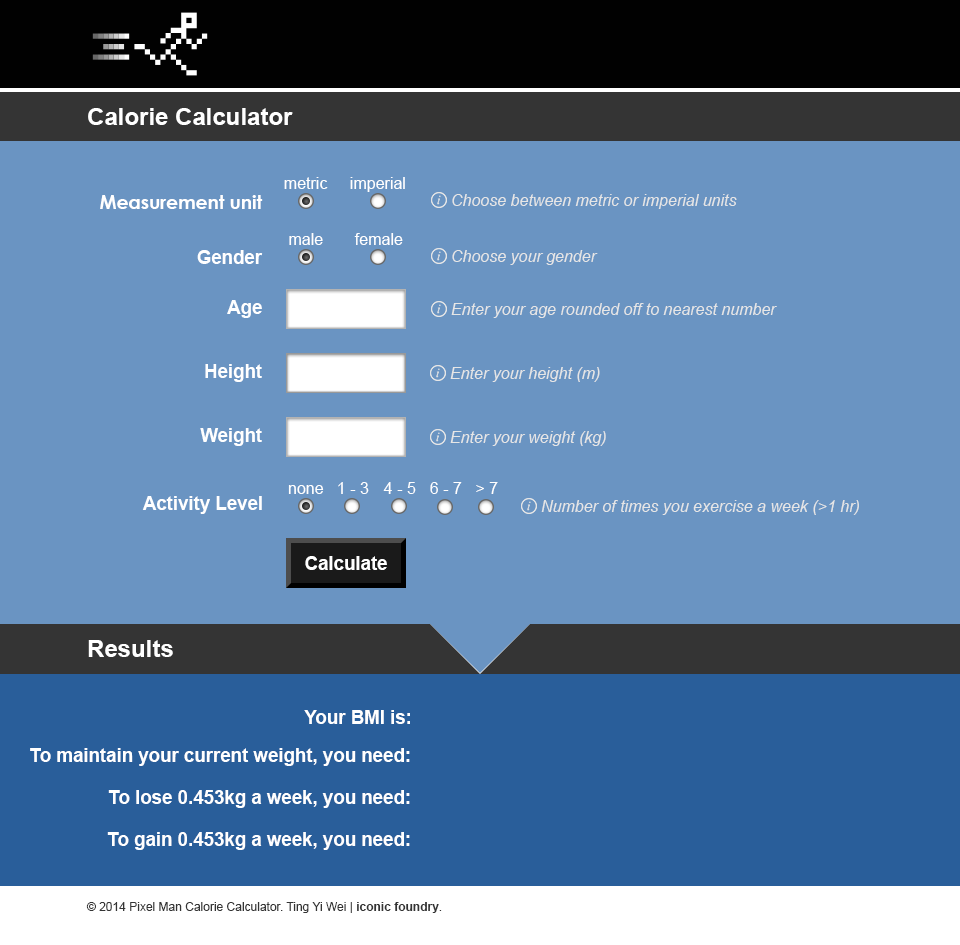
<style>
.page{position:relative;width:960px;height:945px;background:#6a94c2}
.page>*{position:absolute;margin:0}
.t1{font:24px "Arial-BoldMT";color:#ffffff}
.t2{font:16px "ArialMT";color:#ffffff}
.t3{font:18.7px "CenturyGothic-Bold";color:#ffffff}
.t4{font:12px "Arial-ItalicMT";color:#e6e6e6}
.t5{font:18.7px "Arial-BoldMT";color:#ffffff}
.t6{font:12px "ArialMT";color:#343434}
.t7{font:12px "Arial-BoldMT";color:#343434}
</style>
<div class="page">
<p class="t1" style="left:88px;top:108px;width:205px;height:17px">Calorie Calculator</p>
<p class="t2" style="left:284px;top:177px;width:44px;height:12px">metric</p>
<p class="t2" style="left:350px;top:177px;width:55px;height:15px">imperial</p>
<p class="t3" style="left:100px;top:195px;width:163px;height:14px">Measurement unit</p>
<p class="t4" style="left:452px;top:194px;width:285px;height:15px">Choose between metric or imperial units</p>
<p class="t2" style="left:289px;top:233px;width:34px;height:12px">male</p>
<p class="t2" style="left:354px;top:233px;width:49px;height:12px">female</p>
<p class="t5" style="left:197px;top:250px;width:66px;height:14px">Gender</p>
<p class="t4" style="left:452px;top:250px;width:146px;height:15px">Choose your gender</p>
<p class="t5" style="left:227px;top:300px;width:35px;height:18px">Age</p>
<p class="t4" style="left:451px;top:303px;width:326px;height:15px">Enter your age rounded off to nearest number</p>
<p class="t5" style="left:205px;top:364px;width:57px;height:18px">Height</p>
<p class="t4" style="left:450px;top:367px;width:150px;height:15px">Enter your height (m)</p>
<p class="t5" style="left:200px;top:428px;width:62px;height:18px">Weight</p>
<p class="t4" style="left:450px;top:431px;width:156px;height:15px">Enter your weight (kg)</p>
<p class="t2" style="left:288px;top:485px;width:36px;height:9px">none</p>
<p class="t2" style="left:338px;top:482px;width:31px;height:12px">1 - 3</p>
<p class="t2" style="left:383px;top:482px;width:33px;height:12px">4 - 5</p>
<p class="t2" style="left:430px;top:482px;width:32px;height:12px">6 - 7</p>
<p class="t2" style="left:476px;top:482px;width:22px;height:12px">&gt; 7</p>
<p class="t5" style="left:142px;top:496px;width:120px;height:18px">Activity Level</p>
<p class="t4" style="left:541px;top:500px;width:318px;height:15px">Number of times you exercise a week (&gt;1 hr)</p>
<p class="t5" style="left:305px;top:556px;width:82px;height:14px">Calculate</p>
<p class="t1" style="left:88px;top:640px;width:85px;height:17px">Results</p>
<p class="t5" style="left:304px;top:710px;width:106px;height:14px">Your BMI is:</p>
<p class="t5" style="left:30px;top:748px;width:380px;height:18px">To maintain your current weight, you need:</p>
<p class="t5" style="left:108px;top:790px;width:302px;height:18px">To lose 0.453kg a week, you need:</p>
<p class="t5" style="left:107px;top:832px;width:303px;height:18px">To gain 0.453kg a week, you need:</p>
<p class="t6" style="left:86px;top:902px;width:356px;height:11px">© 2014 Pixel Man Calorie Calculator. Ting Yi Wei | <span class="t7">iconic foundry</span>.</p>
</div>
